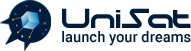
<style>
.page{position:relative;width:191px;height:51px;background:#ffffff}
.page>*{position:absolute;margin:0}
.t1{font:35px "moonhouse";color:#001d3c}
.t2{font:14.8px "Roboto-Medium";color:#001d3c}
</style>
<div class="page">
<p class="t1" style="left:62px;top:8px;width:129px;height:20px">UniSat</p>
<p class="t2" style="left:62px;top:31px;width:129px;height:15px">launch your dreams</p>
</div>
